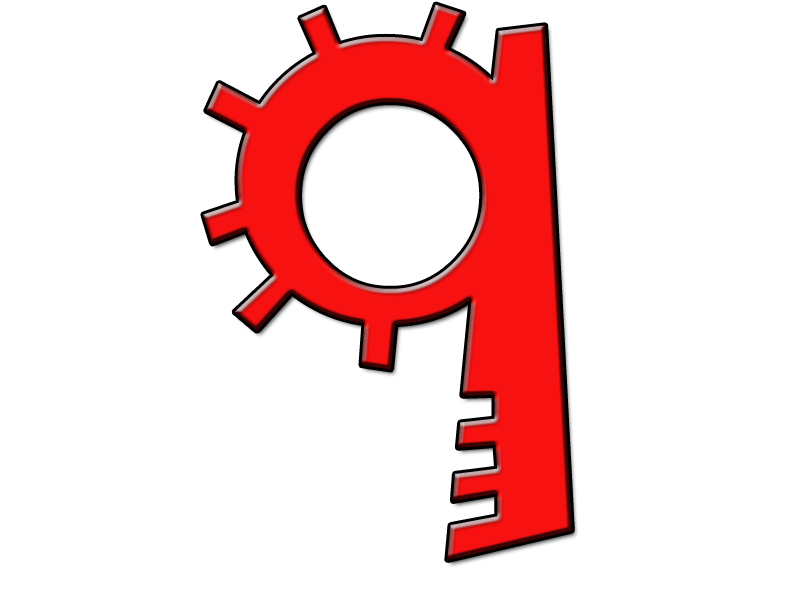
<style>
.page{position:relative;width:800px;height:600px;background:#ffffff}
.page>*{position:absolute;margin:0}
.t1{font:600px "Jokerman-Regular";color:#f81111}
</style>
<div class="page">
<p class="t1" style="left:203px;top:4px;width:369px;height:556px">9</p>
</div>
